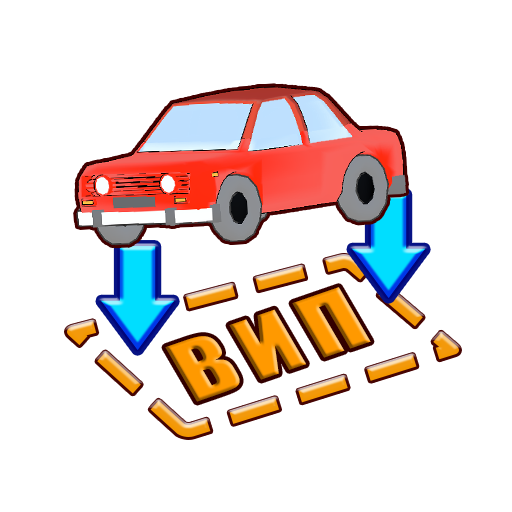
<style>
.page{position:relative;width:512px;height:512px;background:#ffffff}
.page>*{position:absolute;margin:0}
.t1{font:79.6px "Impact";letter-spacing:0.1em;color:#ff9900;scale:1.3 1}
</style>
<div class="page">
<p class="t1" style="left:165px;top:287px;width:206px;height:115px;rotate:-19deg">ВИП</p>
</div>
